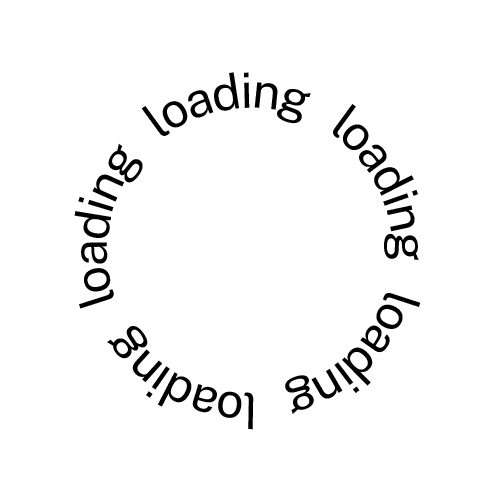
<style>
.page{position:relative;width:500px;height:500px;background:#ffffff}
.page>*{position:absolute;margin:0}
.t1{font:48.8px/41.7px "PublicSans-Regular";letter-spacing:-0.05em;color:#000000}
</style>
<div class="page">
<p class="t1" style="left:74px;top:72px;width:347px;height:358px">loading   loading   loading   loading   loading</p>
</div>
